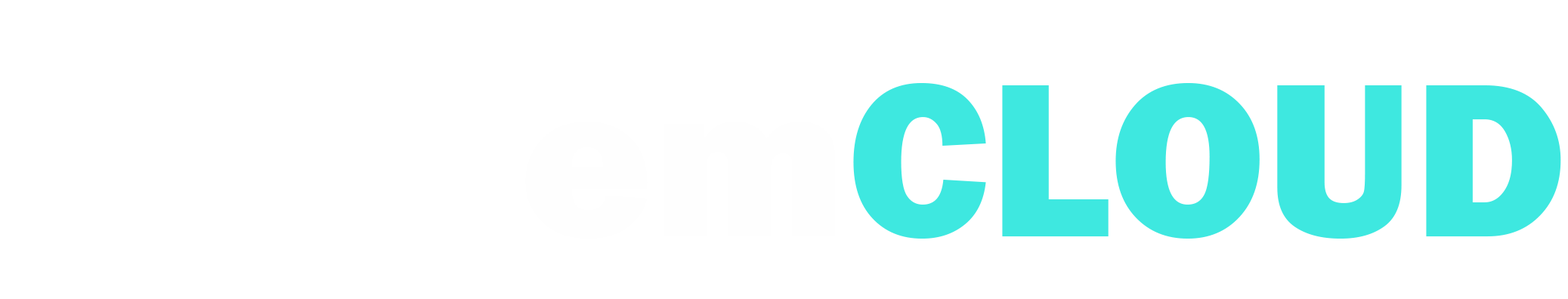
<style>
.page{position:relative;width:1568px;height:299px;background:#ffffff}
.page>*{position:absolute;margin:0}
.t1{font:226.7px "FranklinGothic-Heavy";color:#3ee8e0}
.t2{font:226.7px "FranklinGothic-Heavy";color:#fefefe}
</style>
<div class="page">
<p class="t1" style="left:525px;top:83px;width:1036px;height:156px"><span class="t2">em</span>CLOUD</p>
</div>
